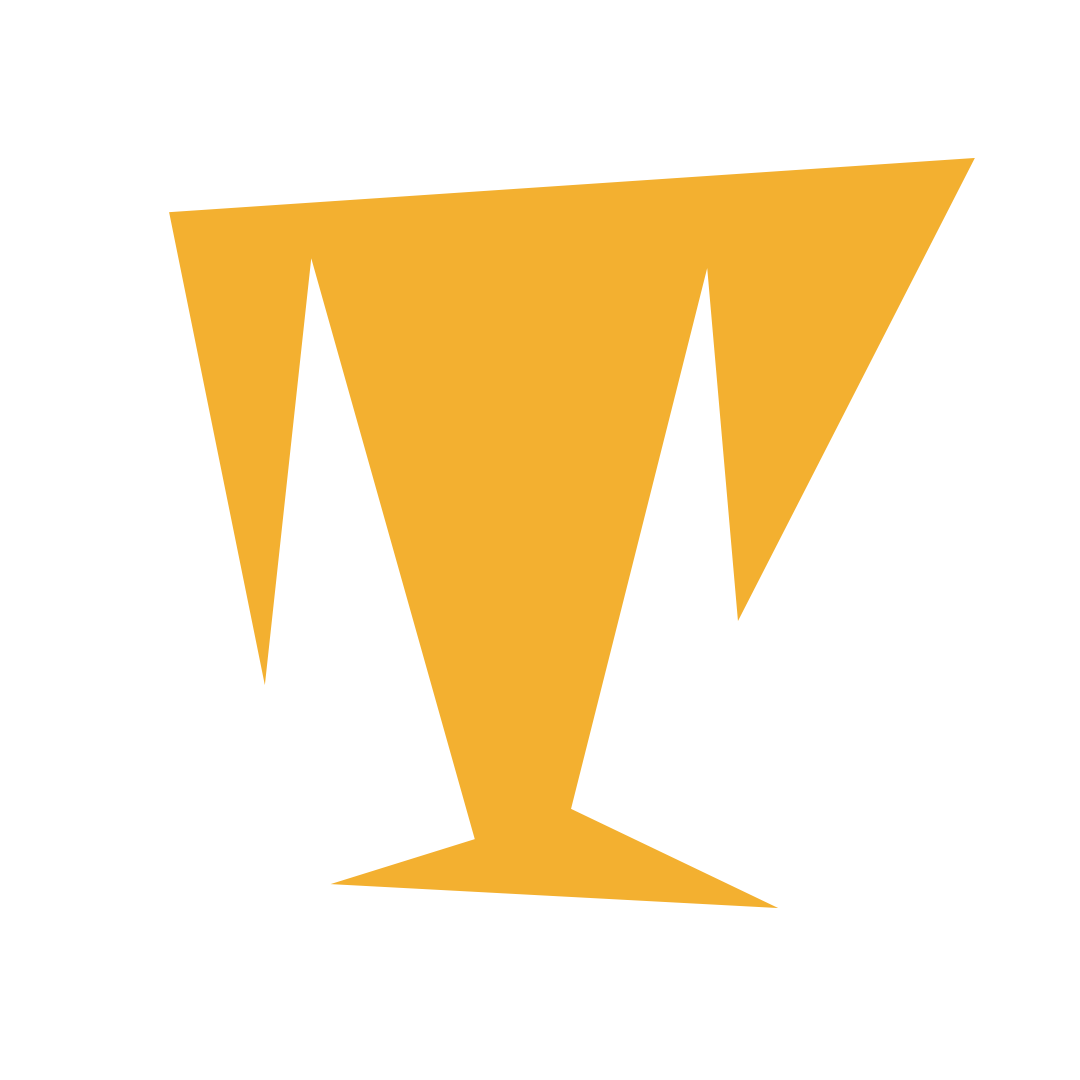
<style>
.page{position:relative;width:1080px;height:1080px;background:#ffffff}
.page>*{position:absolute;margin:0}
.t1{font:1000px "SnapITC-Regular";color:#f3b030}
</style>
<div class="page">
<p class="t1" style="left:169px;top:157px;width:806px;height:751px">T</p>
</div>
